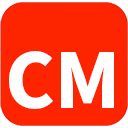
<style>
.page{position:relative;width:128px;height:128px;background:#fc2500}
.page>*{position:absolute;margin:0}
.t1{font:84.9px "SourceSansPro-Bold";color:#ffffff}
</style>
<div class="page">
<p class="t1" style="left:9px;top:51px;width:105px;height:58px">CM</p>
</div>
